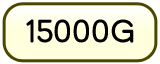
<style>
.page{position:relative;width:160px;height:64px;background:#ffffdd}
.page>*{position:absolute;margin:0}
.t1{font:40px "YanoljaYacheR";color:#000000}
</style>
<div class="page">
<p class="t1" style="left:26px;top:19px;width:108px;height:24px">15000G</p>
</div>
